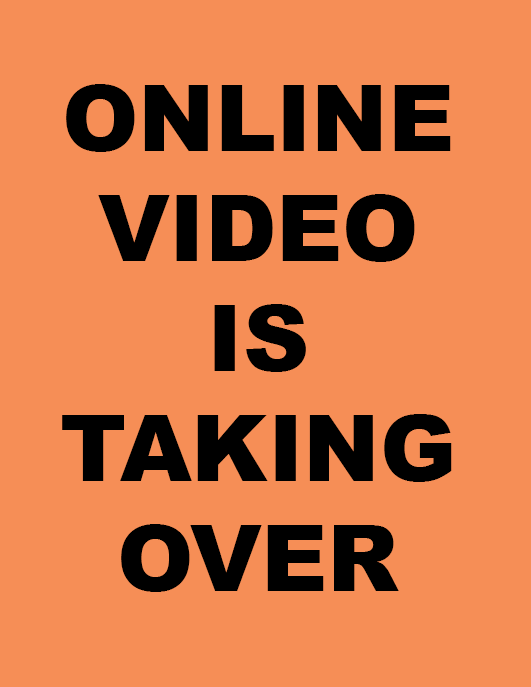
<style>
.page{position:relative;width:531px;height:687px;background:#f68e56}
.page>*{position:absolute;margin:0}
.t1{font:91.7px "Arial-Black";color:#000000}
</style>
<div class="page">
<p class="t1" style="left:62px;top:84px;width:390px;height:508px;text-align:center">ONLINE VIDEO IS TAKING OVER</p>
</div>
